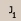
<style>
.page{position:relative;width:21px;height:21px;background:#d9cdc1}
.page>*{position:absolute;margin:0}
.t1{font:9px "Tahoma";color:#000000}
.t2{font:8px "Tahoma";color:#000000}
</style>
<div class="page">
<p class="t1" style="left:9px;top:6px;width:4px;height:8px">J</p>
<p class="t2" style="left:12px;top:12px;width:4px;height:6px">1</p>
</div>
